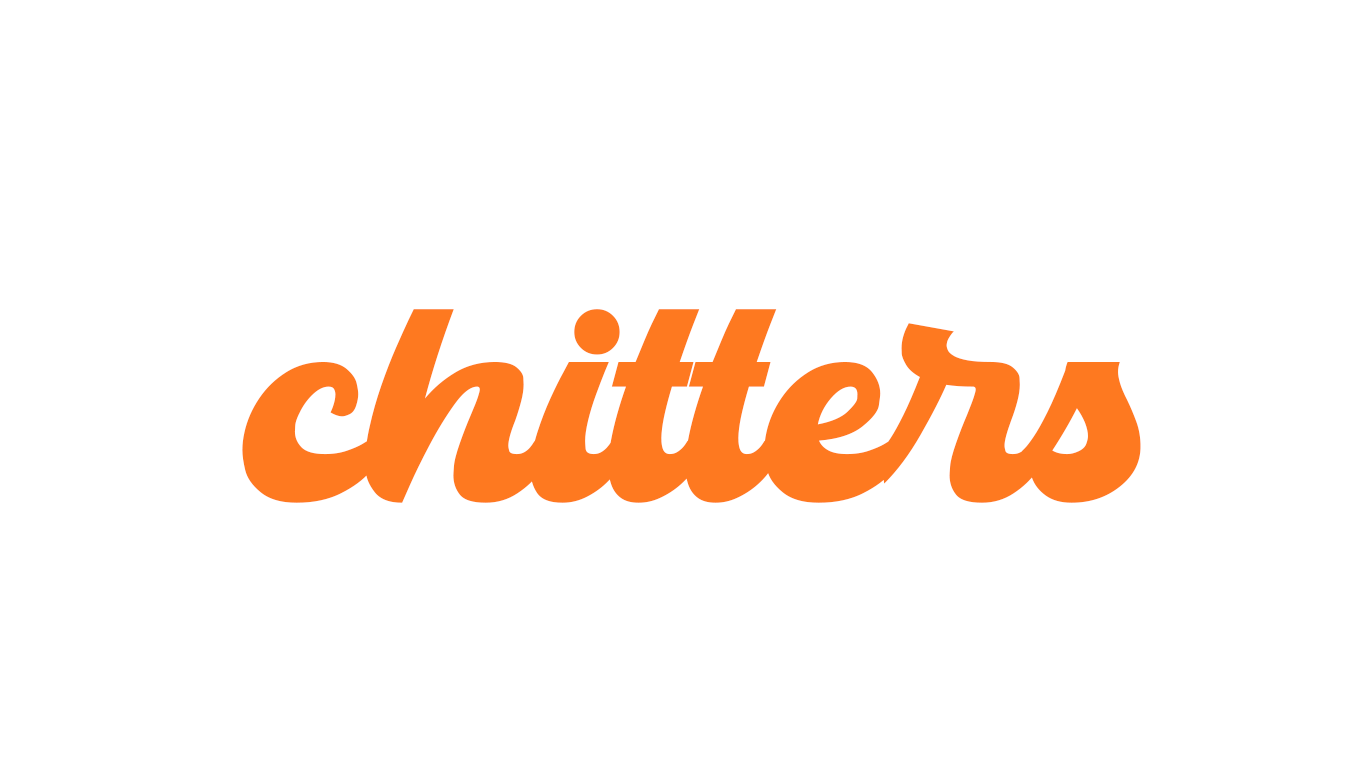
<style>
.page{position:relative;width:1366px;height:768px;background:#ffffff}
.page>*{position:absolute;margin:0}
.t1{font:300px "Mainstay";color:#fe7920}
</style>
<div class="page">
<p class="t1" style="left:242px;top:309px;width:899px;height:194px">chitters</p>
</div>
